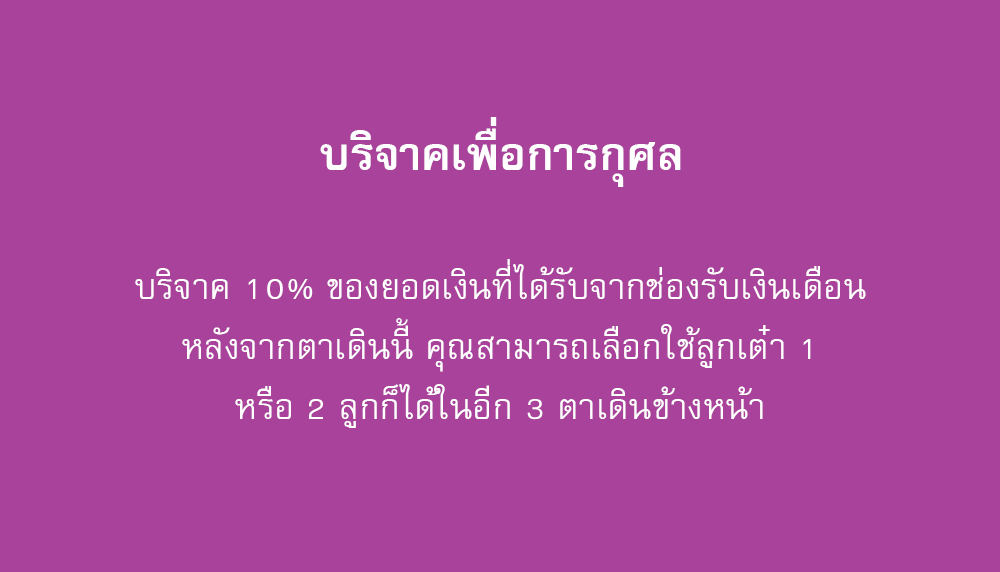
<style>
.page{position:relative;width:1000px;height:572px;background:#a8429b}
.page>*{position:absolute;margin:0}
.t1{font:64px "FreesiaUPCBold";color:#ffffff}
.t2{font:50px/60px "FreesiaUPC";color:#ffffff}
</style>
<div class="page">
<p class="t1" style="left:320px;top:117px;width:361px;height:70px">บริจาคเพื่อการกุศล</p>
<p class="t2" style="left:135px;top:259px;width:731px;height:169px;text-align:center">บริจาค 10% ของยอดเงินที่ได้รับจากช่องรับเงินเดือน<br>หลังจากตาเดินนี้ คุณสามารถเลือกใช้ลูกเต๋า 1<br>หรือ 2 ลูกก็ได้ในอีก 3 ตาเดินข้างหน้า</p>
</div>
